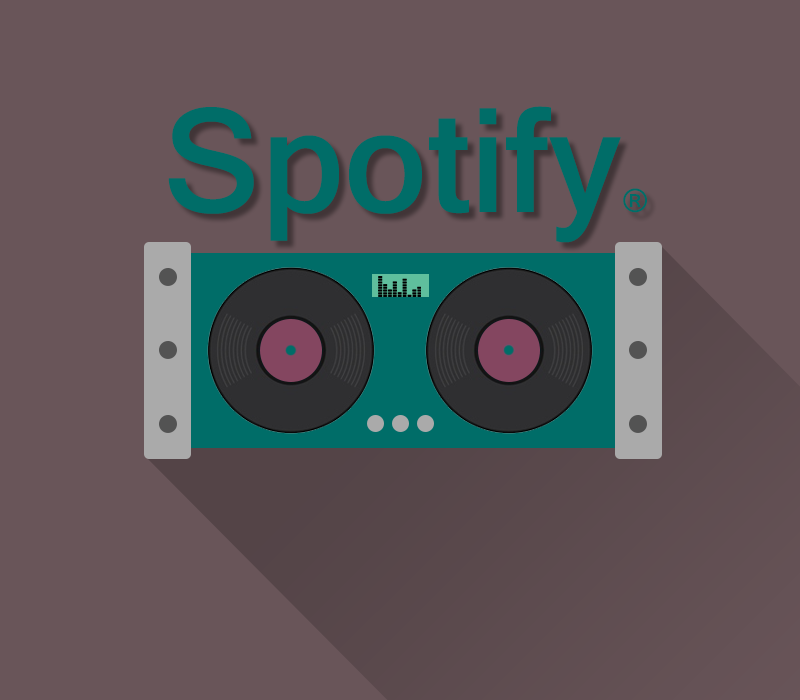
<style>
.page{position:relative;width:800px;height:700px;background:#695559}
.page>*{position:absolute;margin:0}
.t1{font:156px "Shruti-Bold";color:#006d68}
.t2{font:35px "Shruti-Bold";color:#006d68}
</style>
<div class="page">
<p class="t1" style="left:168px;top:106px;width:479px;height:137px">Spotify<span class="t2">®</span></p>
</div>
